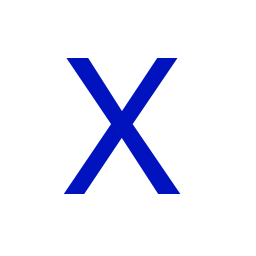
<style>
.page{position:relative;width:256px;height:256px;background:#ffffff}
.page>*{position:absolute;margin:0}
.t1{font:190px "HelveticaNeueLTPro-Roman";color:#0113be}
</style>
<div class="page">
<p class="t1" style="left:63px;top:58px;width:118px;height:136px">X</p>
</div>
